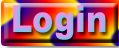
<style>
.page{position:relative;width:119px;height:48px}
.page>*{position:absolute;margin:0}
.t1{font:37.3px "Arial-Black";scale:0.86 1}
</style>
<div class="page">
<p class="t1" style="left:13px;top:5px;width:93px;height:35px">Login</p>
</div>
